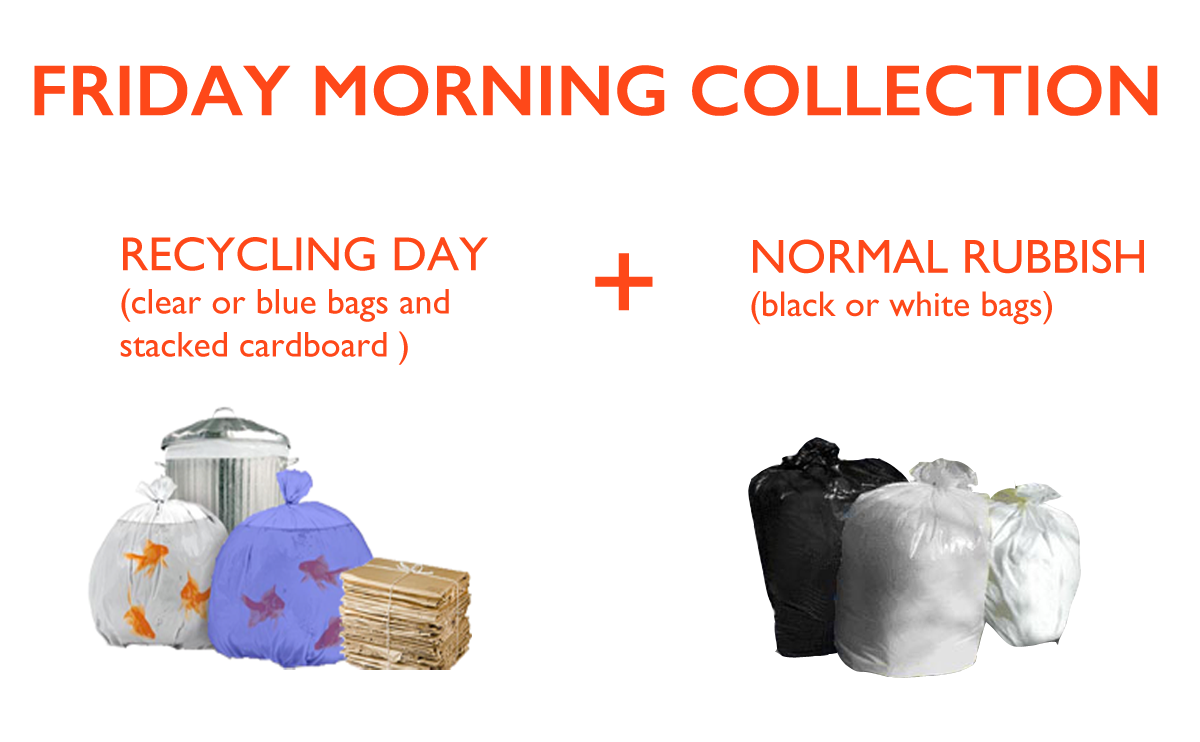
<style>
.page{position:relative;width:1200px;height:742px;background:#ffffff}
.page>*{position:absolute;margin:0}
.t1{font:72px "GillSans-SemiBold";color:#fe4819}
.t2{font:36px "GillSans";color:#fe4819}
.t3{font:48px "GillSans";color:#fe4819}
.t4{font:120px "GillSans";color:#fe4819}
</style>
<div class="page">
<p class="t1" style="left:34px;top:65px;width:1124px;height:51px">FRIDAY MORNING COLLECTION</p>
<p class="t2" style="left:120px;top:237px;width:368px;height:128px"><span class="t3">RECYCLING DAY<br></span>(clear or blue bags and <br>stacked cardboard )</p>
<p class="t2" style="left:751px;top:239px;width:393px;height:86px"><span class="t3">NORMAL RUBBISH<br></span>(black or white bags)</p>
<p class="t4" style="left:595px;top:253px;width:58px;height:58px">+</p>
</div>
